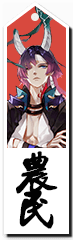
<style>
.page{position:relative;width:73px;height:240px;background:#ffffff}
.page>*{position:absolute;margin:0}
.t1{font:48px/18px "SunYatsenHsingshu-";color:#020202;font-weight:bold}
</style>
<div class="page">
<p class="t1" style="left:16px;top:151px;width:42px;height:78px">农<br><br>民</p>
</div>
